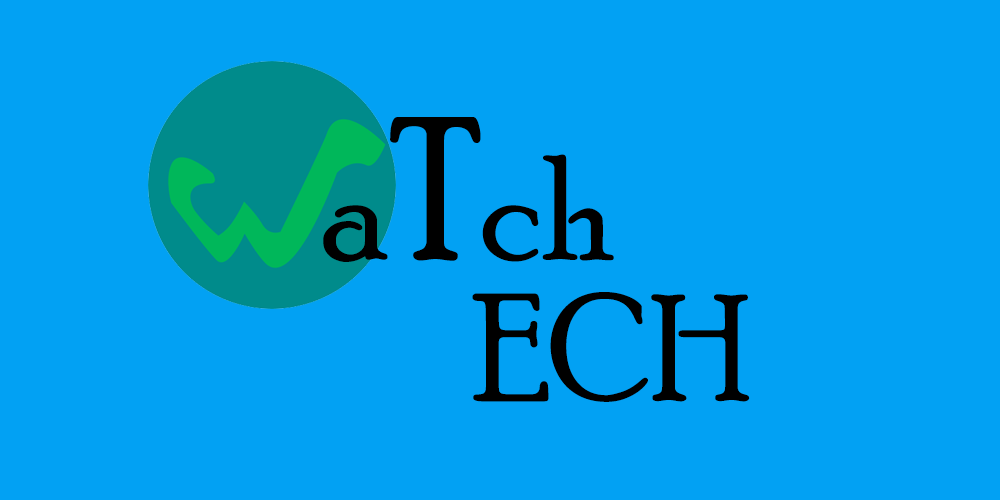
<style>
.page{position:relative;width:1000px;height:500px;background:#02a1f3}
.page>*{position:absolute;margin:0}
.t1{font:150px "PoorRichard-Regular";color:#000000}
.t2{font:200px "PoorRichard-Regular";color:#000000}
</style>
<div class="page">
<p class="t1" style="left:323px;top:117px;width:291px;height:145px">a<span class="t2">T</span>ch</p>
<p class="t1" style="left:472px;top:292px;width:278px;height:110px">ECH</p>
</div>
